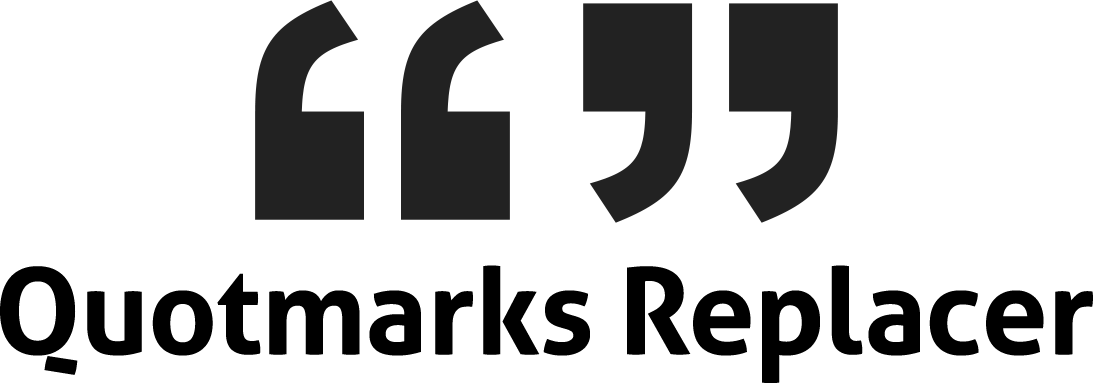
<style>
.page{position:relative;width:1093px;height:383px;background:#ffffff}
.page>*{position:absolute;margin:0}
.t1{font:120px "Aller-Bold";letter-spacing:-0.01em;color:#000000}
</style>
<div class="page">
<p class="t1" style="left:0px;top:265px;width:1093px;height:119px">Quotmarks Replacer</p>
</div>
